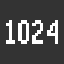
<style>
.page{position:relative;width:64px;height:64px;background:#333333}
.page>*{position:absolute;margin:0}
.t1{font:40.9px "Glasstown-NBP";letter-spacing:0.005em;color:#ffffff;font-weight:bold}
</style>
<div class="page">
<p class="t1" style="left:6px;top:20px;width:52px;height:24px">1024</p>
</div>
